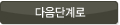
<style>
.page{position:relative;width:120px;height:25px;background:#444337}
.page>*{position:absolute;margin:0}
.t1{font:12.1px "YDIYGO330";color:#ffffff;scale:0.91 1}
</style>
<div class="page">
<p class="t1" style="left:35px;top:7px;width:51px;height:11px">다음단계로</p>
</div>
